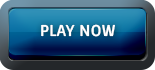
<style>
.page{position:relative;width:155px;height:70px}
.page>*{position:absolute;margin:0}
.t1{font:15px "Sintony-Bold";letter-spacing:0.02em;color:#ffffff}
</style>
<div class="page">
<p class="t1" style="left:41px;top:24px;width:74px;height:13px">PLAY NOW</p>
</div>
